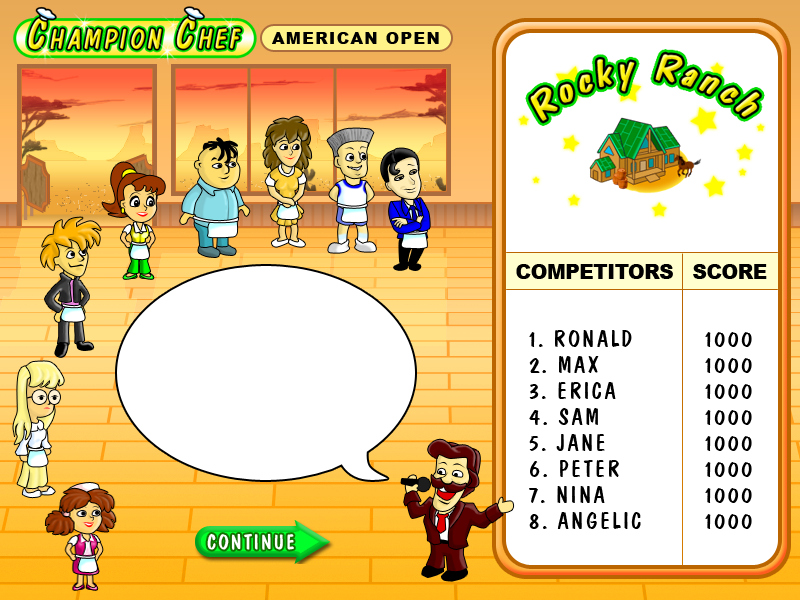
<style>
.page{position:relative;width:800px;height:600px;background:#ffffff}
.page>*{position:absolute;margin:0}
.t1{font:15.9px "Arial-Black";letter-spacing:0.09em;color:#000000;font-variant:small-caps}
.t2{font:19.7px "Arial-Black";letter-spacing:-0.01em;color:#000000;text-transform:uppercase}
.t3{font:24.1px/26px "DomCasualBT-Regular";letter-spacing:0.09em;color:#000000;font-variant:small-caps}
</style>
<div class="page">
<p class="t1" style="left:272px;top:32px;width:167px;height:12px">AMERICAN OPEN</p>
<p class="t2" style="left:516px;top:264px;width:251px;height:15px">competitors   SCORE</p>
<p class="t3" style="left:529px;top:330px;width:112px;height:199px">1. RONALD<br>2. MAX<br>3. ERICA<br>4. SAM<br>5. JANE<br>6. PETER<br>7. NINA<br>8. ANGELIC</p>
<p class="t3" style="left:705px;top:332px;width:47px;height:197px">1000<br>1000<br>1000<br>1000<br>1000<br>1000<br>1000<br>1000</p>
</div>
